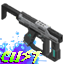
<style>
.page{position:relative;width:64px;height:64px;background:#ffffff}
.page>*{position:absolute;margin:0}
.t1{font:11.8px "DarkFalconDemoRegular";letter-spacing:-0.08em;font-weight:bold;scale:1.38 1}
</style>
<div class="page">
<p class="t1" style="left:1px;top:50px;width:41px;height:13px">CUST</p>
</div>
